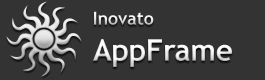
<style>
.page{position:relative;width:265px;height:80px;background:#333333}
.page>*{position:absolute;margin:0}
.t1{font:30px "TrebuchetMS-Bold";letter-spacing:-0.01em;color:#ececec}
.t2{font:18px "TrebuchetMS-Bold";letter-spacing:-0.01em;color:#ececec}
</style>
<div class="page">
<p class="t1" style="left:93px;top:11px;width:139px;height:56px"><span class="t2">Inovato<br></span>AppFrame</p>
</div>
